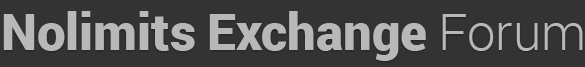
<style>
.page{position:relative;width:585px;height:67px;background:#333333}
.page>*{position:absolute;margin:0}
.t1{font:51px "Roboto-Black";color:#b8b8b8}
.t2{font:51px "Roboto-Light";color:#b8b8b8}
</style>
<div class="page">
<p class="t1" style="left:3px;top:11px;width:580px;height:50px">Nolimits Exchange <span class="t2">Forum</span></p>
</div>
